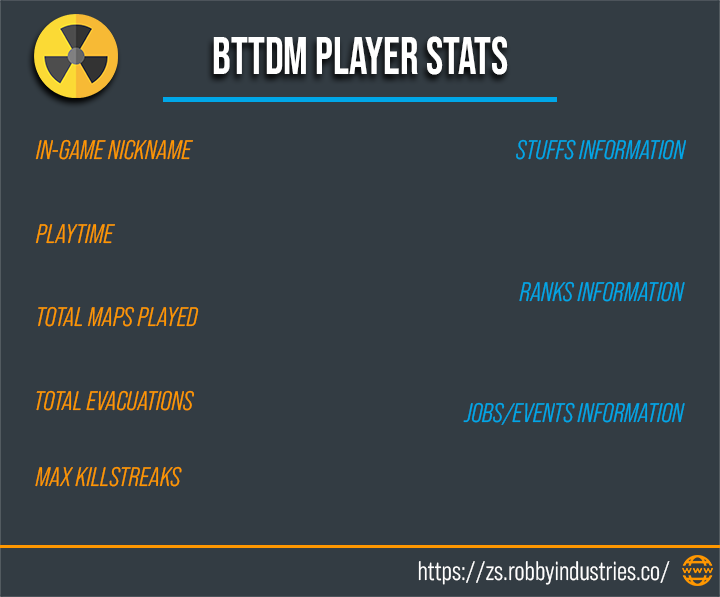
<style>
.page{position:relative;width:720px;height:597px;background:#333c43}
.page>*{position:absolute;margin:0}
.t1{font:53.7px "BebasNeue-Regular";color:#ffffff;scale:0.86 1}
.t2{font:26.8px "BebasNeuePro-MiddleItalic";color:#ff9700}
.t3{font:26.8px "BebasNeuePro-MiddleItalic";color:#00a7e8}
.t4{font:26.9px "BebasNeuePro-Middle";color:#ffffff}
</style>
<div class="page">
<p class="t1" style="left:213px;top:36px;width:295px;height:39px">BTTDM PLAYER STATS</p>
<p class="t2" style="left:35px;top:139px;width:158px;height:21px">IN-GAME NICKNAME</p>
<p class="t3" style="left:516px;top:139px;width:170px;height:21px">STUFFS INFORMATION</p>
<p class="t2" style="left:35px;top:224px;width:80px;height:20px">PLAYTIME</p>
<p class="t3" style="left:519px;top:281px;width:166px;height:21px">RANKS INFORMATION</p>
<p class="t2" style="left:38px;top:306px;width:161px;height:21px">TOTAL MAPS PLAYED</p>
<p class="t2" style="left:36px;top:390px;width:158px;height:21px">TOTAL EVACUATIONS</p>
<p class="t3" style="left:463px;top:402px;width:222px;height:23px">JOBS/EVENTS INFORMATION</p>
<p class="t2" style="left:35px;top:466px;width:147px;height:21px">MAX KILLSTREAKS</p>
<p class="t4" style="left:418px;top:561px;width:252px;height:24px">https://zs.robbyindustries.co/</p>
</div>
